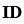
<style>
.page{position:relative;width:24px;height:24px;background:#ffffff}
.page>*{position:absolute;margin:0}
.t1{font:18px "TimesNewRomanPS-BoldMT";color:#000000}
</style>
<div class="page">
<p class="t1" style="left:2px;top:6px;width:20px;height:12px">ID</p>
</div>
